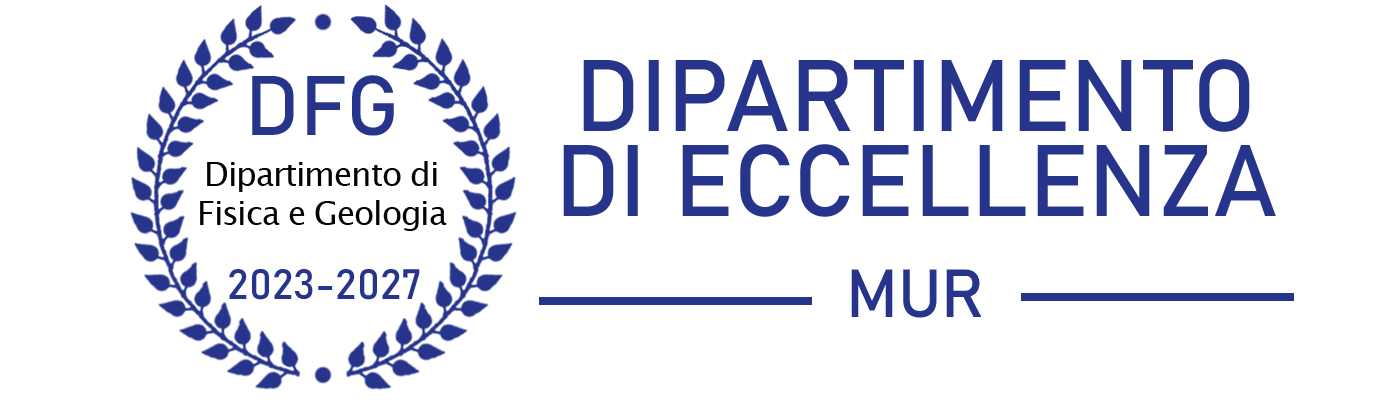
<style>
.page{position:relative;width:1400px;height:400px;background:#ffffff}
.page>*{position:absolute;margin:0}
.t1{font:100px/85px "Bahnschrift";color:#26348b}
.t2{font:83.3px "Bahnschrift";color:#26348b}
.t3{font:33.3px "LucidaSansUnicode";letter-spacing:-0.04em;color:#040404}
.t4{font:41.7px "Bahnschrift";color:#26348b}
.t5{font:66.7px "Bahnschrift";color:#26348b}
</style>
<div class="page">
<p class="t1" style="left:563px;top:59px;width:713px;height:158px;text-align:center">DIPARTIMENTO<br>DI ECCELLENZA</p>
<p class="t2" style="left:252px;top:75px;width:142px;height:61px">DFG</p>
<p class="t3" style="left:207px;top:161px;width:230px;height:31px">Dipartimento di</p>
<p class="t3" style="left:200px;top:200px;width:247px;height:31px">Fisica e Geologia</p>
<p class="t4" style="left:229px;top:269px;width:191px;height:31px">2023-2027</p>
<p class="t5" style="left:851px;top:269px;width:131px;height:49px">MUR</p>
</div>
